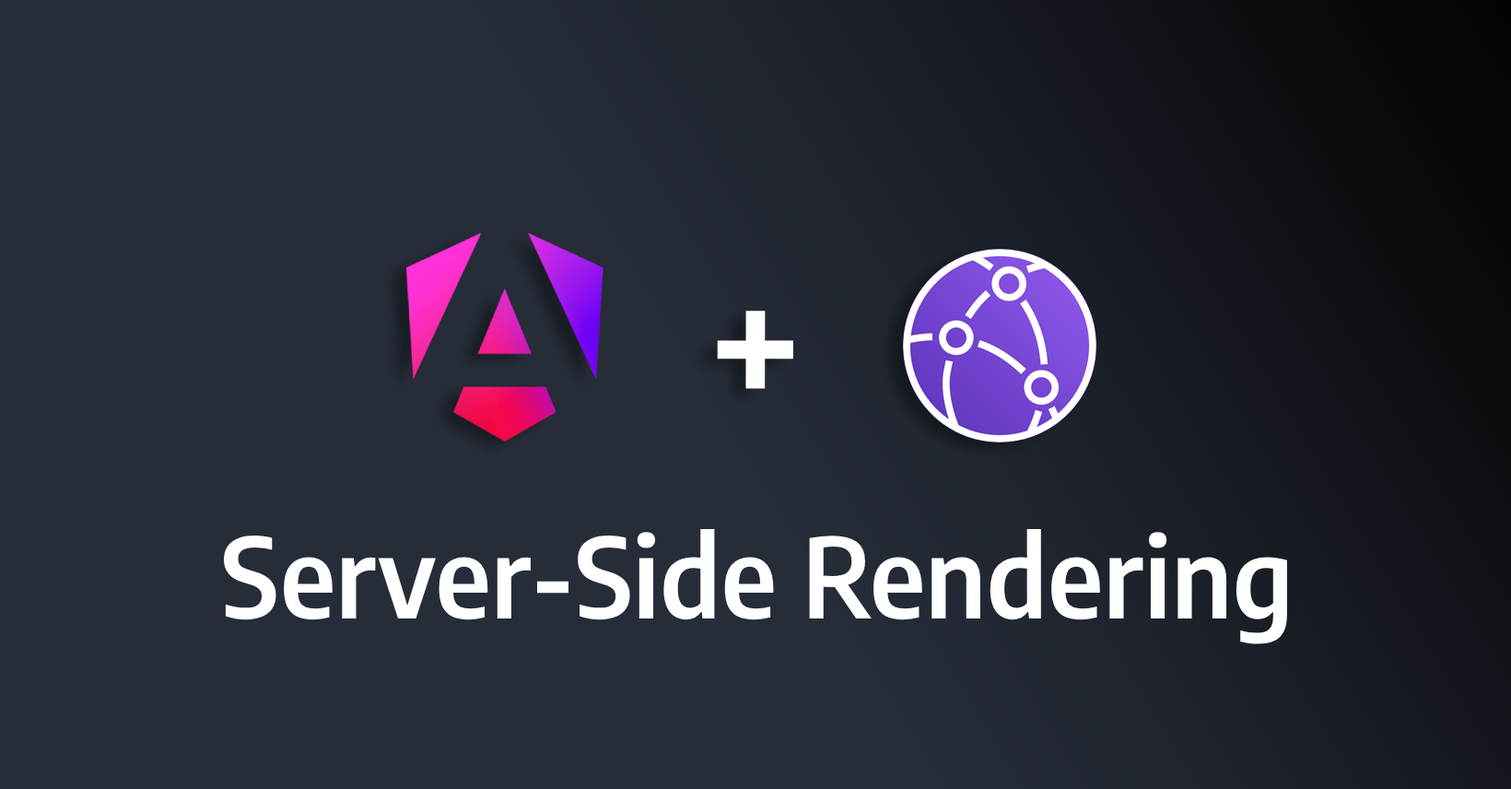
<style>
.page{position:relative;width:1511px;height:789px;background:#262c38}
.page>*{position:absolute;margin:0}
.t1{font:184.3px "EncodeSansSemiCondensed-SemiBold";color:#ffffff}
.t2{font:110.6px "EncodeSansSemiCondensed-SemiBold";color:#ffffff}
</style>
<div class="page">
<p class="t1" style="left:717px;top:311px;width:77px;height:78px">+</p>
<p class="t2" style="left:224px;top:529px;width:1064px;height:115px">Server-Side Rendering</p>
</div>
